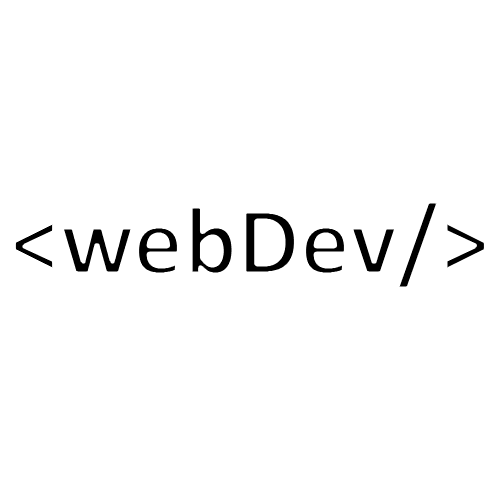
<style>
.page{position:relative;width:500px;height:500px;background:#ffffff}
.page>*{position:absolute;margin:0}
.t1{font:100px "Calibri-Bold"}
</style>
<div class="page">
<p class="t1" style="left:13px;top:201px;width:474px;height:88px">&lt;webDev/&gt;</p>
</div>
